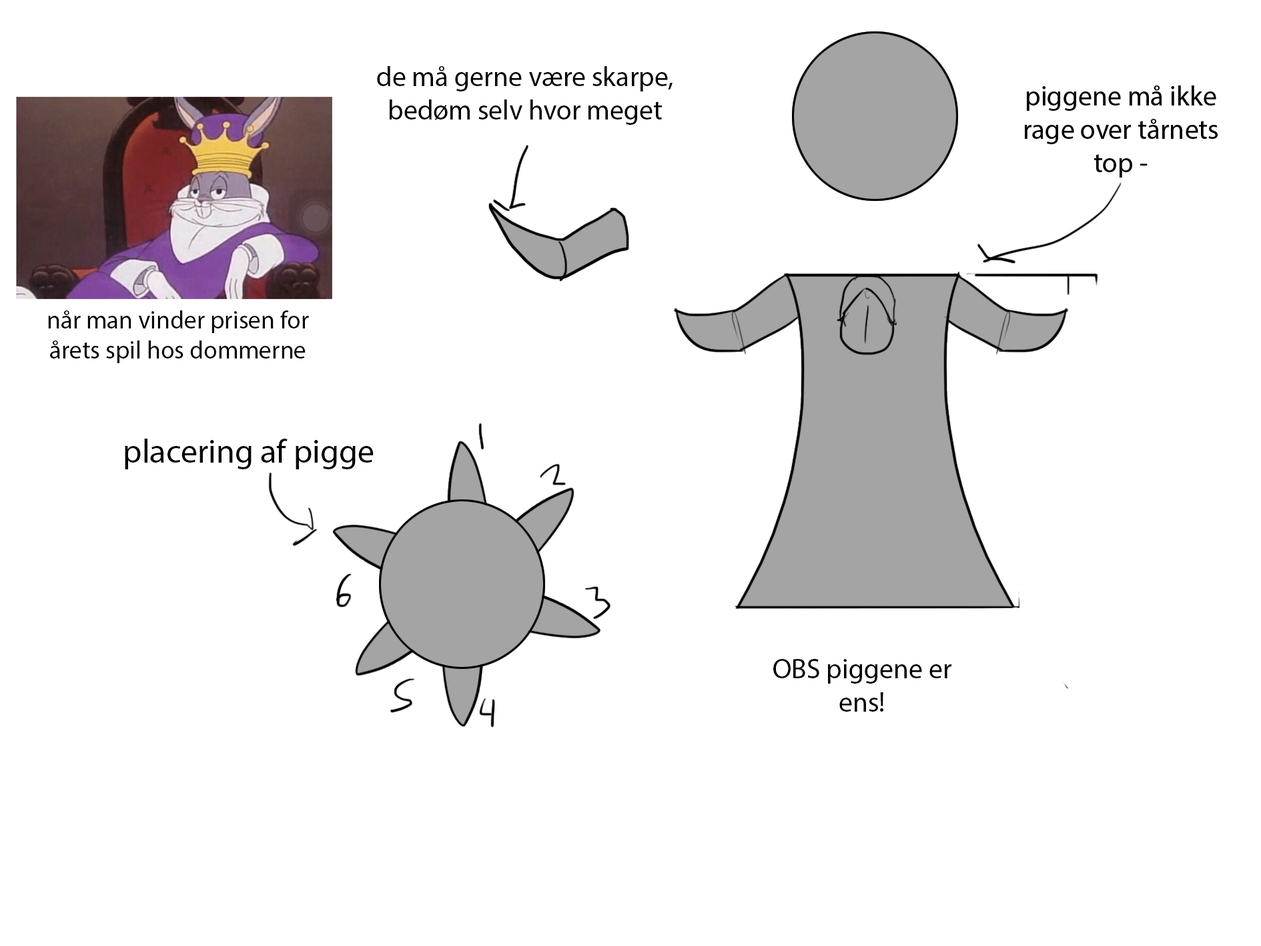
<style>
.page{position:relative;width:1261px;height:946px;background:#ffffff}
.page>*{position:absolute;margin:0}
.t1{font:27.8px "MyriadPro-Regular";color:#000000}
.t2{font:25px "MyriadPro-Regular";color:#000000}
.t3{font:8px "MyriadPro-Regular";color:#000000}
</style>
<div class="page">
<p class="t1" style="left:377px;top:66px;width:296px;height:59px;text-align:center">de må gerne være skarpe, bedøm selv hvor meget</p>
<p class="t2" style="left:48px;top:310px;width:261px;height:53px;text-align:center">når man vinder prisen for årets spil hos dommerne</p>
<p class="t3" style="left:125px;top:438px;width:249px;height:31px;text-align:center">placering af pigge</p>
<p class="t1" style="left:773px;top:659px;width:179px;height:52px;text-align:center">OBS piggene er ens!</p>
</div>
